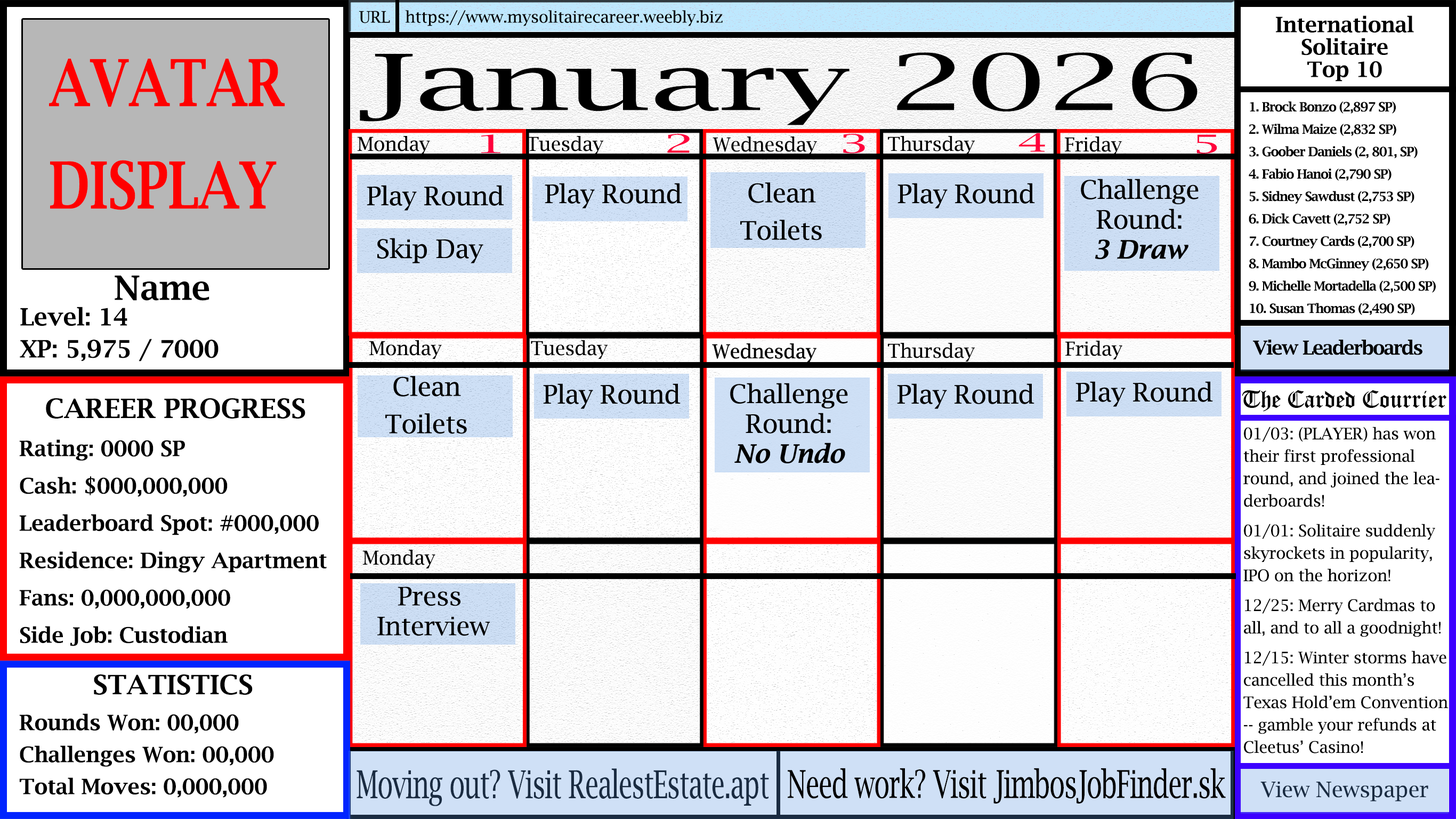
<style>
.page{position:relative;width:1456px;height:819px;background:#ffffff}
.page>*{position:absolute;margin:0}
.t1{font:16px "LucidaBright";letter-spacing:-0.01em;color:#000000}
.t2{font:21.3px/7.5px "LucidaBright-Demi";color:#000000}
.t3{font:77.5px "LucidaBright";letter-spacing:-0.01em;color:#000000;scale:1.71 1}
.t4{font:65px/6.4px "LucidaBright-Demi";color:#ff0000;scale:0.79 1}
.t5{font:12.8px/7.5px "LucidaBright-Demi";letter-spacing:-0.05em;color:#000000}
.t6{font:19.2px "LucidaBright";letter-spacing:-0.01em;color:#000000}
.t7{font:25.4px "LucidaBright";letter-spacing:-0.01em;color:#ff003c;scale:2 1}
.t8{font:24px/6.4px "LucidaBright-Demi";color:#000000}
.t9{font:33.6px/6.4px "LucidaBright-Demi";color:#000000}
.t10{font:19.2px "LucidaBright-Demi";letter-spacing:-0.05em;color:#000000}
.t11{font:24.5px "OldEnglishTextMT";letter-spacing:-0.01em;color:#000000}
.t12{font:26.7px "LucidaBright-Demi";color:#000000}
.t13{font:16px/7.5px "LucidaBright";letter-spacing:-0.01em;color:#000000}
.t14{font:25.6px/7.5px "LucidaBright";letter-spacing:-0.01em;color:#000000}
.t15{font:21.3px "LucidaBright-Demi";color:#000000}
.t16{font:21.3px/6.4px "LucidaBright-Demi";color:#000000}
.t17{font:38.4px "LucidaBright";letter-spacing:-0.025em;color:#1a2b41;scale:0.67 1}
.t18{font:38.4px "LucidaBright";letter-spacing:-0.025em;color:#000000;scale:0.67 1}
.t19{font:21.3px "LucidaBright";letter-spacing:-0.01em;color:#1a2b41}
</style>
<div class="page">
<p class="t1" style="left:359px;top:11px;width:31px;height:12px">URL</p>
<p class="t1" style="left:405px;top:10px;width:318px;height:16px">https://www.mysolitairecareer.weebly.biz</p>
<p class="t2" style="left:1276px;top:15px;width:138px;height:67px;text-align:center">International<br><br><br>Solitaire<br><br><br>Top 10</p>
<p class="t3" style="left:360px;top:52px;width:838px;height:73px">January 2026</p>
<p class="t4" style="left:49px;top:59px;width:236px;height:151px">AVATAR<br><br><br><br><br><br><br><br><br><br><br><br><br><br><br><br>DISPLAY</p>
<p class="t5" style="left:1249px;top:101px;width:187px;height:214px">1. Brock Bonzo (2,897 SP)<br><br><br>2. Wilma Maize (2,832 SP)<br><br><br>3. Goober Daniels (2, 801, SP)<br><br><br>4. Fabio Hanoi (2,790 SP)<br><br><br>5. Sidney Sawdust (2,753 SP)<br><br><br>6. Dick Cavett (2,752 SP)<br><br><br>7. Courtney Cards (2,700 SP)<br><br><br>8. Mambo McGinney (2,650 SP)<br><br><br>9. Michelle Mortadella (2,500 SP)<br><br><br>10. Susan Thomas (2,490 SP)</p>
<p class="t6" style="left:357px;top:136px;width:73px;height:19px">Monday</p>
<p class="t7" style="left:481px;top:134px;width:20px;height:19px">1</p>
<p class="t6" style="left:527px;top:136px;width:76px;height:19px">Tuesday</p>
<p class="t7" style="left:667px;top:134px;width:23px;height:19px">2</p>
<p class="t6" style="left:713px;top:136px;width:104px;height:19px">Wednesday</p>
<p class="t7" style="left:843px;top:134px;width:22px;height:20px">3</p>
<p class="t6" style="left:888px;top:136px;width:87px;height:19px">Thursday</p>
<p class="t7" style="left:1019px;top:133px;width:26px;height:19px">4</p>
<p class="t6" style="left:1065px;top:136px;width:57px;height:19px">Friday</p>
<p class="t7" style="left:1197px;top:134px;width:21px;height:20px">5</p>
<p class="t8" style="left:20px;top:275px;width:199px;height:86px"><span class="t9">         Name<br>  <br><br> <br></span>Level: 14   <br><br><br><br><br>XP: 5,975 / 7000</p>
<p class="t6" style="left:369px;top:340px;width:73px;height:19px">Monday</p>
<p class="t6" style="left:531px;top:340px;width:77px;height:19px">Tuesday</p>
<p class="t6" style="left:1066px;top:341px;width:57px;height:18px">Friday</p>
<p class="t10" style="left:1253px;top:340px;width:170px;height:15px">View Leaderboards</p>
<p class="t6" style="left:712px;top:343px;width:105px;height:19px">Wednesday</p>
<p class="t6" style="left:712px;top:343px;width:105px;height:19px">Wednesday</p>
<p class="t6" style="left:888px;top:343px;width:87px;height:18px">Thursday</p>
<p class="t11" style="left:1242px;top:390px;width:205px;height:22px">The Carded Courrier</p>
<p class="t12" style="left:46px;top:398px;width:259px;height:20px">CAREER PROGRESS</p>
<p class="t13" style="left:1244px;top:426px;width:205px;height:327px">01/03: (PLAYER) has won <br><br><br>their first professional<br><br><br>round, and joined the lea-<br><br><br>derboards! <br><br><br><br>01/01: Solitaire suddenly<br><br><br>skyrockets in popularity,<br><br><br>IPO on the horizon!<br><br><br><br>12/25: Merry Cardmas to<br><br><br>all, and to all a goodnight!<br><br><br><br>12/15: Winter storms have<br><br><br>cancelled this month’s<br><br><br>Texas Hold’em Convention<br><br><br>-- gamble your refunds at<br><br><br>Cleetus’ Casino!</p>
<p class="t2" style="left:19px;top:439px;width:308px;height:207px">Rating: 0000 SP<br><br><br><br><br>Cash: $000,000,000<br><br><br><br><br>Leaderboard Spot: #000,000<br><br><br><br><br>Residence: Dingy Apartment<br><br><br><br><br>Fans: 0,000,000,000<br><br><br><br><br>Side Job: Custodian</p>
<p class="t6" style="left:362px;top:550px;width:74px;height:18px">Monday</p>
<p class="t14" style="left:377px;top:586px;width:113px;height:50px;text-align:center">Press <br><br><br><br>Interview</p>
<p class="t12" style="left:94px;top:674px;width:159px;height:21px"><span class="t15">    </span>   STATISTICS</p>
<p class="t16" style="left:19px;top:713px;width:255px;height:84px">Rounds Won: 00,000<br><br><br><br><br>Challenges Won: 00,000<br><br><br><br><br>Total Moves: 0,000,000</p>
<p class="t17" style="left:357px;top:768px;width:412px;height:38px">Moving out? Visit RealestEstate.apt</p>
<p class="t18" style="left:788px;top:768px;width:438px;height:35px">Need work? Visit JimbosJobFinder.sk</p>
<p class="t19" style="left:1261px;top:781px;width:168px;height:20px">View Newspaper</p>
</div>
